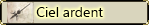
<style>
.page{position:relative;width:149px;height:25px;background:#d9d5bd}
.page>*{position:absolute;margin:0}
.t1{font:14px "LaoUI";color:#000000}
</style>
<div class="page">
<p class="t1" style="left:36px;top:7px;width:67px;height:10px">Ciel ardent</p>
</div>
